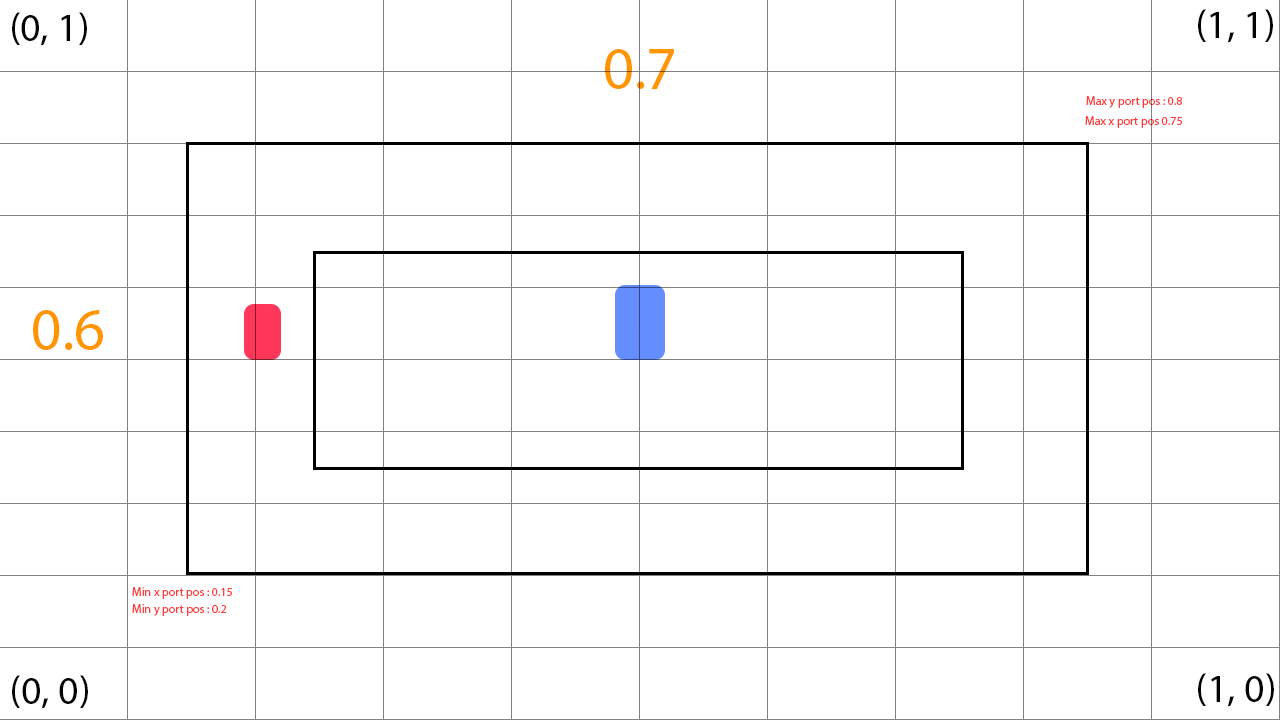
<style>
.page{position:relative;width:1280px;height:720px;background:#ffffff}
.page>*{position:absolute;margin:0}
.t1{font:40px "MyriadPro-Regular";color:#030303}
.t2{font:60.4px "MyriadPro-Regular";color:#ff9500}
.t3{font:12px "MyriadPro-Regular";color:#ff3d3d}
.t4{font:59.9px "MyriadPro-Regular";color:#ff9500}
</style>
<div class="page">
<p class="t1" style="left:12px;top:12px;width:75px;height:34px">(0, 1)</p>
<p class="t1" style="left:1198px;top:9px;width:75px;height:34px">(1, 1)</p>
<p class="t2" style="left:605px;top:49px;width:69px;height:40px">0.7</p>
<p class="t3" style="left:1086px;top:96px;width:96px;height:12px">Max y port pos : 0.8</p>
<p class="t3" style="left:1085px;top:116px;width:97px;height:12px">Max x port pos 0.75</p>
<p class="t4" style="left:33px;top:310px;width:70px;height:40px">0.6</p>
<p class="t3" style="left:132px;top:587px;width:100px;height:12px">Min x port pos : 0.15</p>
<p class="t3" style="left:132px;top:604px;width:95px;height:12px">Min y port pos : 0.2</p>
<p class="t1" style="left:12px;top:675px;width:76px;height:34px">(0, 0)</p>
<p class="t1" style="left:1198px;top:673px;width:76px;height:34px">(1, 0)</p>
</div>
